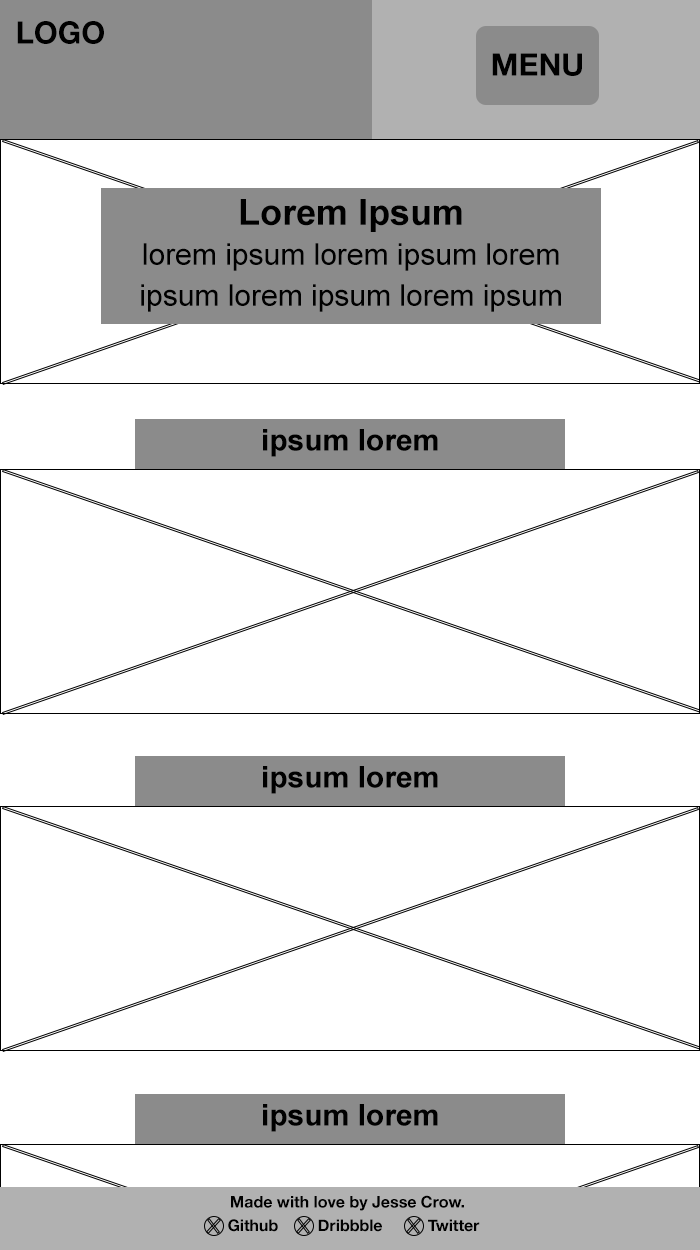
<style>
.page{position:relative;width:700px;height:1250px;background:#ffffff}
.page>*{position:absolute;margin:0}
.t1{font:30.8px "HelveticaNeue-Bold";color:#000000}
.t2{font:30px/40px "ArialMT";color:#000000}
.t3{font:36px/41px "Arial-BoldMT";color:#000000}
.t4{font:30px "Arial-BoldMT";color:#000000}
.t5{font:16px "HelveticaNeue-Bold";color:#000000}
</style>
<div class="page">
<p class="t1" style="left:17px;top:21px;width:87px;height:23px">LOGO</p>
<p class="t1" style="left:492px;top:53px;width:90px;height:23px">MENU</p>
<p class="t2" style="left:141px;top:199px;width:420px;height:113px;text-align:center"><span class="t3">Lorem Ipsum<br></span>lorem ipsum lorem ipsum lorem ipsum lorem ipsum lorem ipsum</p>
<p class="t4" style="left:263px;top:429px;width:175px;height:28px">ipsum lorem</p>
<p class="t4" style="left:263px;top:766px;width:175px;height:28px">ipsum lorem</p>
<p class="t4" style="left:263px;top:1104px;width:175px;height:28px">ipsum lorem</p>
<p class="t5" style="left:231px;top:1195px;width:233px;height:16px">Made with love by Jesse Crow.</p>
<p class="t5" style="left:228px;top:1219px;width:50px;height:13px">Github</p>
<p class="t5" style="left:318px;top:1219px;width:64px;height:13px">Dribbble</p>
<p class="t5" style="left:428px;top:1219px;width:52px;height:13px">Twitter</p>
</div>
